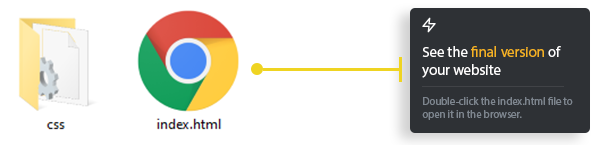
<style>
.page{position:relative;width:600px;height:145px;background:#ffffff}
.page>*{position:absolute;margin:0}
.t1{font:14.7px "MyriadPro-Regular";color:#fffefe}
.t2{font:14.7px "MyriadPro-Regular";color:#f5b223}
.t3{font:10.7px "MyriadPro-Regular";color:#7d858e}
</style>
<div class="page">
<p class="t1" style="left:422px;top:46px;width:139px;height:32px">See the <span class="t2">final version</span> of <br>your website</p>
<p class="t3" style="left:422px;top:97px;width:151px;height:23px">Double-click the index.html file to <br>open it in the browser.</p>
</div>
